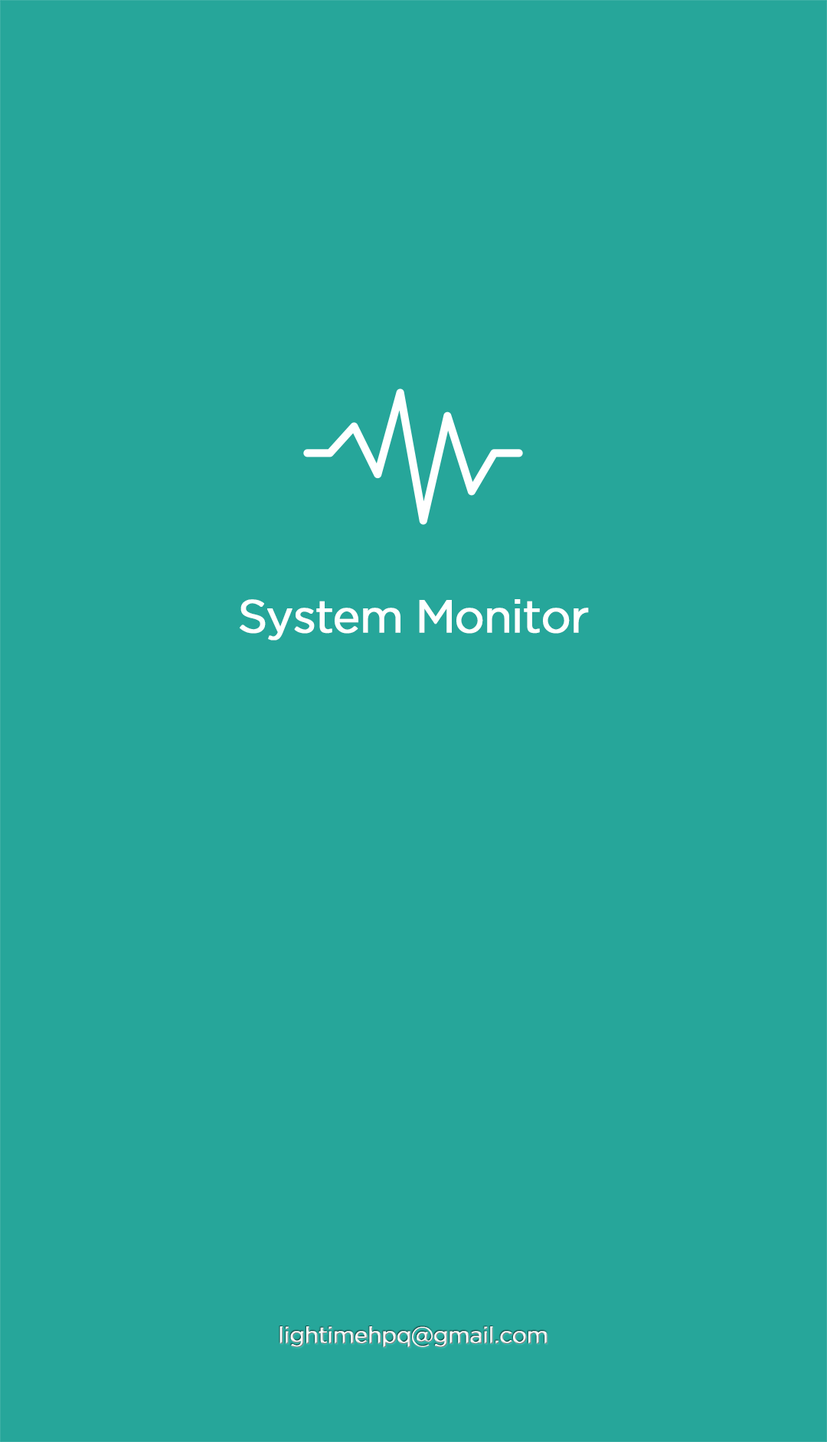
<style>
.page{position:relative;width:827px;height:1442px;background:#26a69a}
.page>*{position:absolute;margin:0}
.t1{font:46px "XHei-Believe";letter-spacing:-0.04em;color:#ffffff;font-weight:bold}
.t2{font:23px "XHei-Believe";letter-spacing:-0.04em;color:#ffffff;font-weight:bold}
</style>
<div class="page">
<p class="t1" style="left:240px;top:599px;width:349px;height:41px">System Monitor</p>
<p class="t2" style="left:280px;top:1326px;width:268px;height:21px">lightimehpq@gmail.com</p>
</div>
